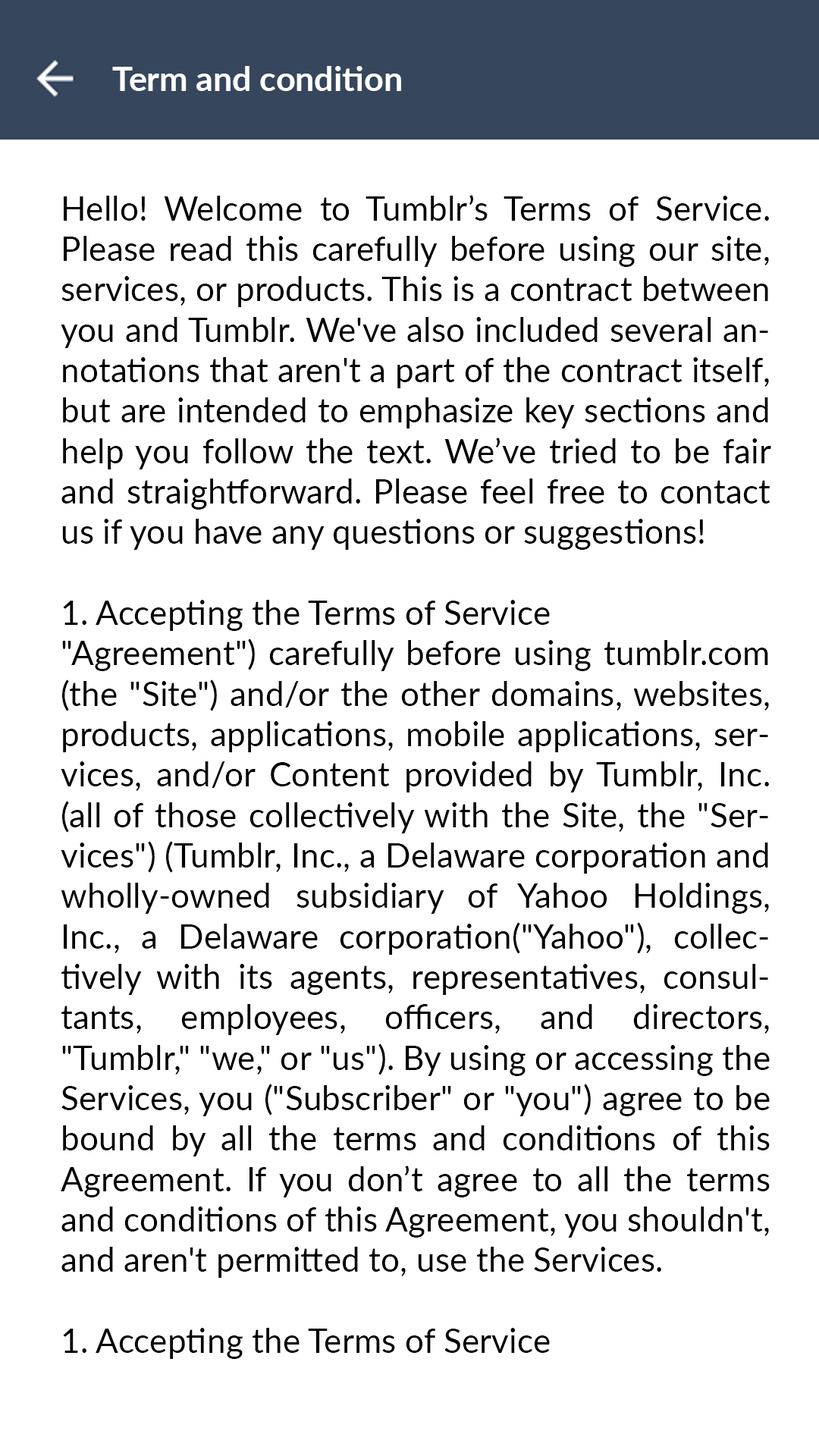
<style>
.page{position:relative;width:819px;height:1456px;background:#ffffff}
.page>*{position:absolute;margin:0}
.t1{font:33.7px "Lato-Bold";color:#ffffff}
.t2{font:33.7px "Lato-Regular";color:#000000}
</style>
<div class="page">
<p class="t1" style="left:112px;top:66px;width:289px;height:25px">Term and condition</p>
<p class="t2" style="left:61px;top:195px;width:710px;height:1164px;text-align:justify">Hello! Welcome to Tumblr’s Terms of Service. Please read this carefully before using our site, services, or products. This is a contract between you and Tumblr. We've also included several annotations that aren't a part of the contract itself, but are intended to emphasize key sections and help you follow the text. We’ve tried to be fair and straightforward. Please feel free to contact us if you have any questions or suggestions!<br><br>1. Accepting the Terms of Service<br>"Agreement") carefully before using tumblr.com (the "Site") and/or the other domains, websites, products, applications, mobile applications, services, and/or Content provided by Tumblr, Inc. (all of those collectively with the Site, the "Services") (Tumblr, Inc., a Delaware corporation and wholly-owned subsidiary of Yahoo Holdings, Inc., a Delaware corporation("Yahoo"), collectively with its agents, representatives, consultants, employees, officers, and directors, "Tumblr," "we," or "us"). By using or accessing the Services, you ("Subscriber" or "you") agree to be bound by all the terms and conditions of this Agreement. If you don’t agree to all the terms and conditions of this Agreement, you shouldn't, and aren't permitted to, use the Services.<br><br>1. Accepting the Terms of Service<br>"Agreement") carefully before using tumblr.com (the "Site") and/or the other domains, websites, products, applications, mobile applications, services, and/or Content provided by Tumblr, Inc. (all of those collectively with the Site, the "Services") (Tumblr, Inc., a Delaware corporation and wholly-owned subsidiary of Yahoo Holdings, Inc., a Delaware corporation("Yahoo"), collectively with its agents, representatives, consultants, employees, officers, and directors, "Tumblr," "we," or "us"). By using or accessing the Services, you ("Subscriber" or "you") agree to be bound by all the terms and conditions of this Agreement. If you don’t agree to all the terms and conditions of this Agreement, you shouldn't, and aren't permitted to, use the Services.</p>
</div>
